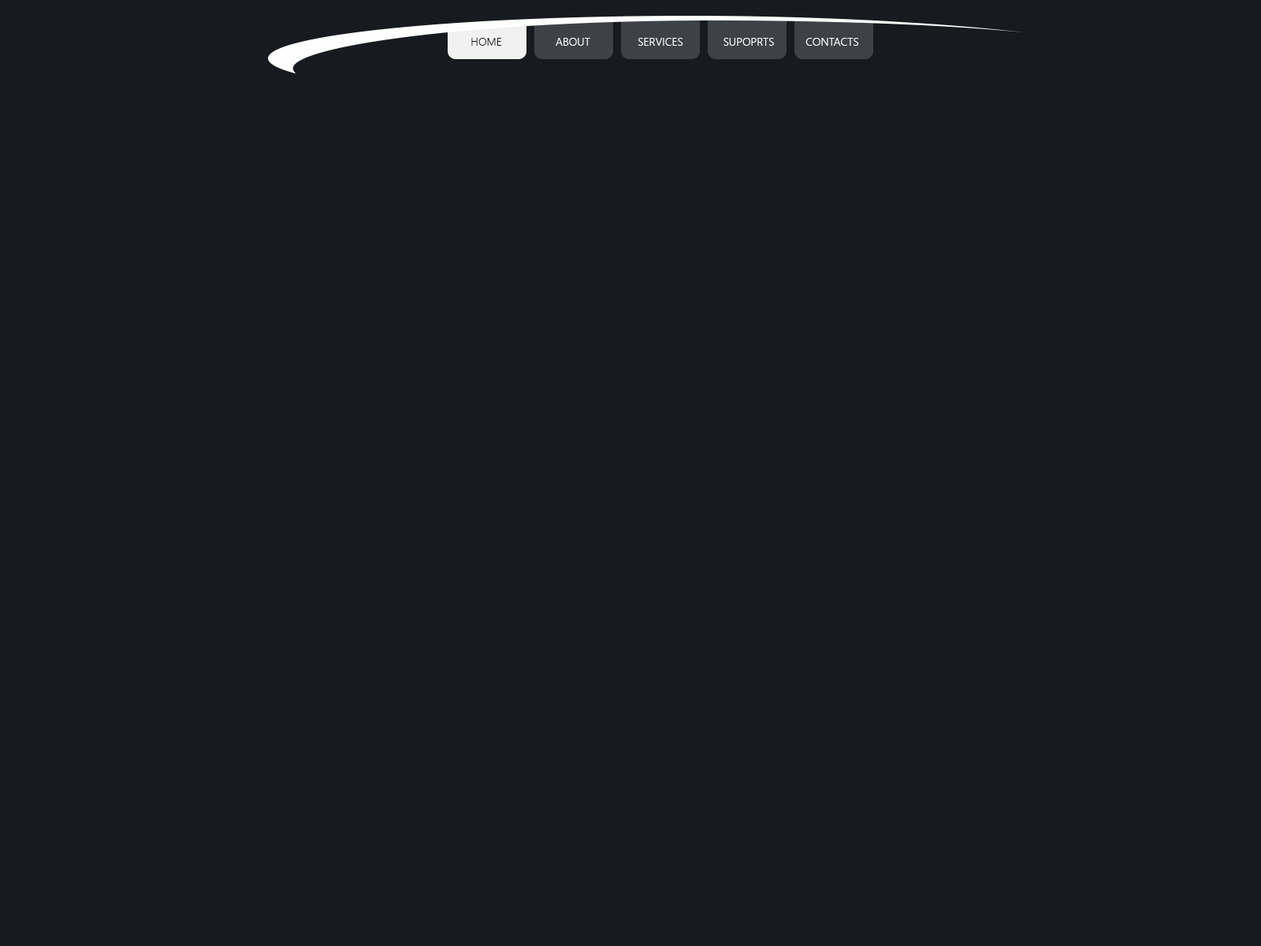
<style>
.page{position:relative;width:1261px;height:946px;background:#171a1e}
.page>*{position:absolute;margin:0}
.t1{font:11px "SegoeUI-Semilight";color:#171a1e}
.t2{font:11px "SegoeUI-Semilight";color:#fefefe}
</style>
<div class="page">
<p class="t1" style="left:471px;top:38px;width:31px;height:8px">HOME</p>
<p class="t2" style="left:556px;top:38px;width:34px;height:8px">ABOUT</p>
<p class="t2" style="left:638px;top:38px;width:44px;height:8px">SERVICES</p>
<p class="t2" style="left:723px;top:38px;width:51px;height:8px">SUPOPRTS</p>
<p class="t2" style="left:805px;top:38px;width:53px;height:8px">CONTACTS</p>
</div>
